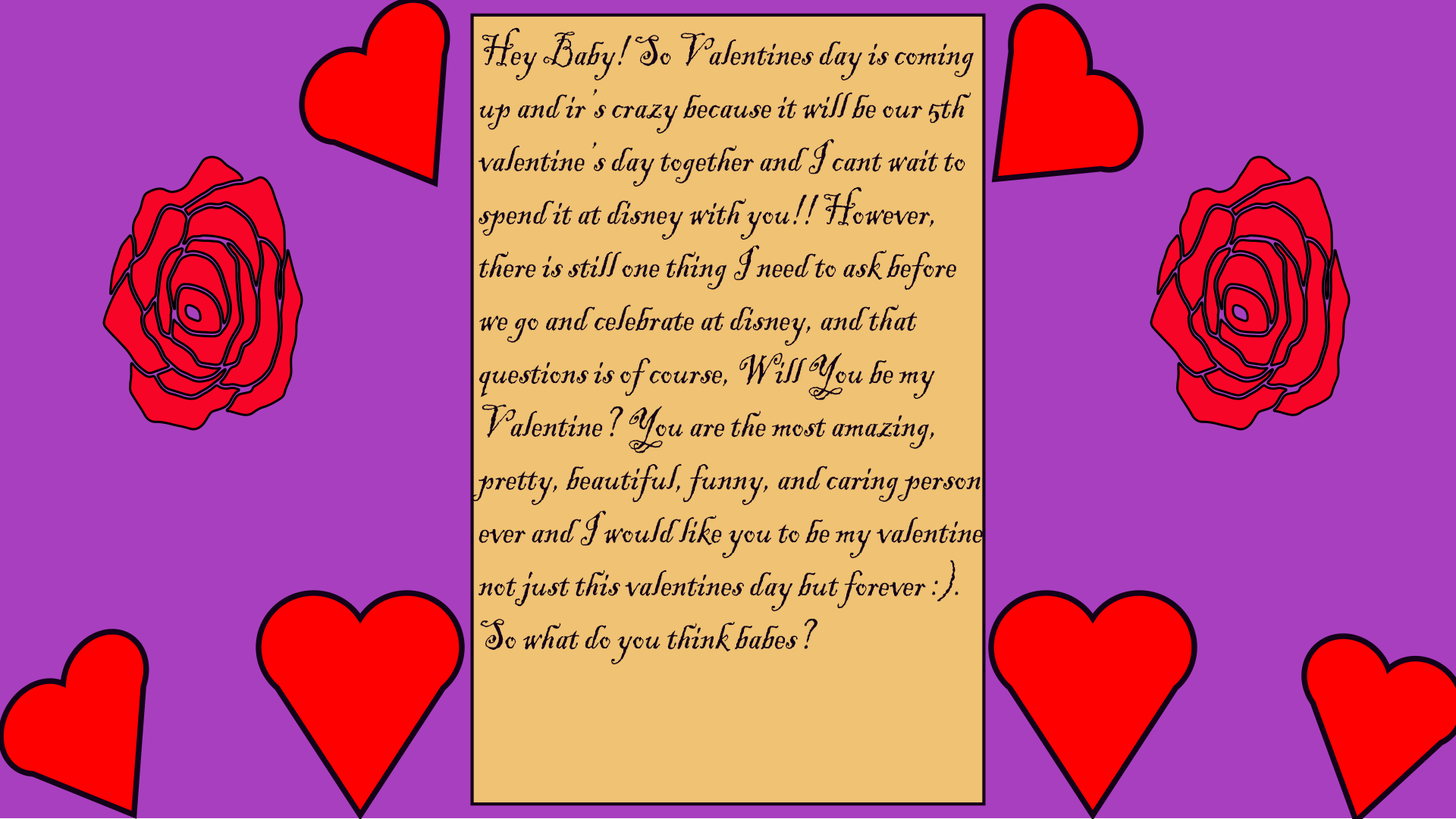
<style>
.page{position:relative;width:1456px;height:819px;background:#a83fbf}
.page>*{position:absolute;margin:0}
.t1{font:44.2px "BlackadderITC-Regular";color:#140118;scale:0.83 1}
</style>
<div class="page">
<p class="t1" style="left:471px;top:27px;width:512px;height:637px">Hey Baby! So Valentines day is coming <br>up and ir’s crazy because it will be our 5th <br>valentine’s day together and I cant wait to <br>spend it at disney with you!! However, <br>there is still one thing I need to ask before <br>we go and celebrate at disney, and that <br>questions is of course, Will You be my<br>Valentine? You are the most amazing, <br>pretty, beautiful, funny, and caring person<br>ever and I would like you to be my valentine<br>not just this valentines day but forever :).<br>So what do you think babes?</p>
</div>
